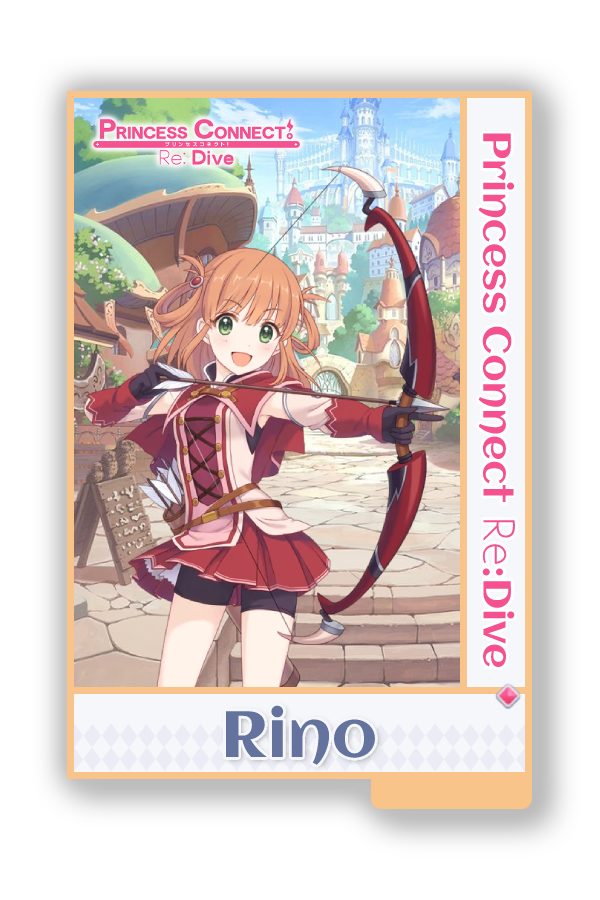
<style>
.page{position:relative;width:600px;height:900px;background:#ffffff}
.page>*{position:absolute;margin:0}
.t1{font:39px "Aclonica-Regular";color:#f55191}
.t2{font:39px "AaarghNormal";color:#f55191}
.t3{font:65px "Aclonica-Regular";color:#64739d}
</style>
<div class="page">
<p class="t1" style="left:478px;top:133px;width:38px;height:534px;rotate:90deg">Princess Connect <span class="t2">Re</span>:Dive</p>
<p class="t3" style="left:225px;top:705px;width:150px;height:60px">Rino</p>
</div>
